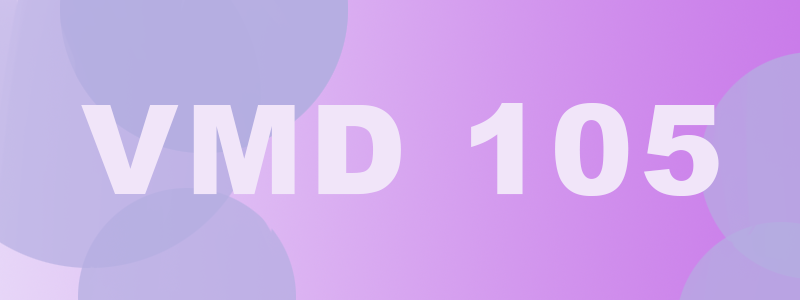
<style>
.page{position:relative;width:800px;height:300px}
.page>*{position:absolute;margin:0}
.t1{font:125px "Arial-Black";letter-spacing:0.05em;color:#f1e5f9}
</style>
<div class="page">
<p class="t1" style="left:81px;top:103px;width:638px;height:93px">VMD 105</p>
</div>
